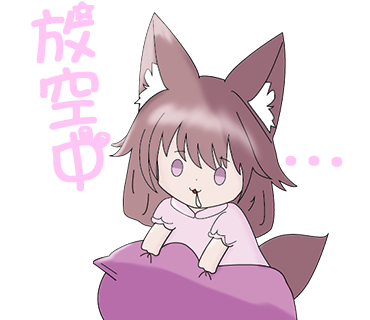
<style>
.page{position:relative;width:370px;height:320px;background:#ffffff}
.page>*{position:absolute;margin:0}
.t1{font:71.4px/62.8px "ARTianniuB5-Bold";color:#ffc6f5;font-weight:bold}
.t2{font:66.6px "ARTianniuB5-Bold";color:#ffc6f5;font-weight:bold}
</style>
<div class="page">
<p class="t1" style="left:31px;top:1px;width:80px;height:190px;rotate:-6deg">放<br>空<br>中</p>
<p class="t2" style="left:285px;top:155px;width:58px;height:12px;rotate:1deg">...</p>
</div>
